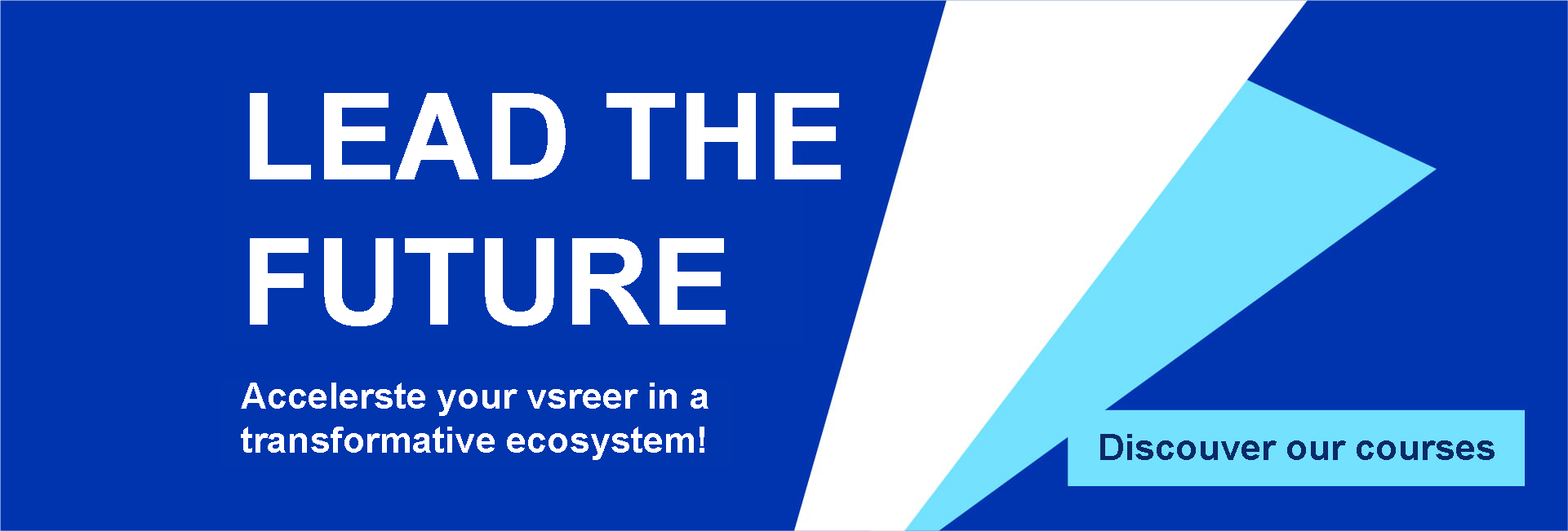
<style>
.page{position:relative;width:1568px;height:531px;background:#0034ae}
.page>*{position:absolute;margin:0}
.t1{font:121.1px "Arial-BoldMT";color:#ffffff}
.t2{font:36.7px "Arial-BoldMT";color:#ffffff}
.t3{font:36.7px "Arial-BoldMT";color:#0b2969}
</style>
<div class="page">
<p class="t1" style="left:250px;top:93px;width:591px;height:233px">LEAD THE<br>FUTURE</p>
<p class="t2" style="left:241px;top:383px;width:467px;height:77px">Accelerste your vsreer in a<br>transformative ecosystem!</p>
<p class="t3" style="left:1100px;top:434px;width:395px;height:26px">Discouver our courses</p>
</div>
